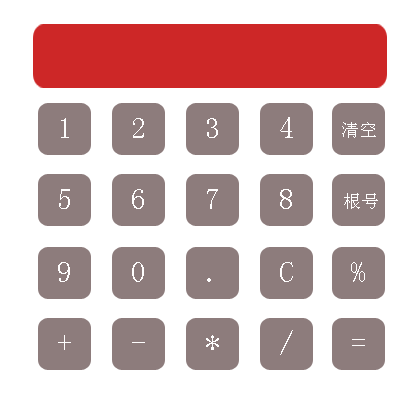
<style>
.page{position:relative;width:420px;height:400px;background:#ffffff}
.page>*{position:absolute;margin:0}
.t1{font:30px "SimSun";color:#fefdfd}
.t2{font:18px "SimSun";color:#fefdfd}
</style>
<div class="page">
<p class="t1" style="left:61px;top:118px;width:8px;height:20px">1</p>
<p class="t1" style="left:133px;top:118px;width:11px;height:20px">2</p>
<p class="t1" style="left:207px;top:118px;width:11px;height:20px">3</p>
<p class="t1" style="left:280px;top:117px;width:13px;height:21px">4</p>
<p class="t2" style="left:342px;top:122px;width:34px;height:16px">清空</p>
<p class="t1" style="left:59px;top:189px;width:11px;height:20px">5</p>
<p class="t1" style="left:132px;top:189px;width:12px;height:20px">6</p>
<p class="t1" style="left:207px;top:189px;width:11px;height:20px">7</p>
<p class="t1" style="left:280px;top:189px;width:12px;height:20px">8</p>
<p class="t2" style="left:344px;top:193px;width:34px;height:16px">根号</p>
<p class="t1" style="left:58px;top:262px;width:12px;height:20px">9</p>
<p class="t1" style="left:132px;top:262px;width:12px;height:20px">0</p>
<p class="t1" style="left:280px;top:262px;width:13px;height:20px">C</p>
<p class="t1" style="left:351px;top:262px;width:14px;height:20px">%</p>
<p class="t1" style="left:207px;top:278px;width:4px;height:4px">.</p>
<p class="t1" style="left:58px;top:335px;width:13px;height:15px">+</p>
<p class="t1" style="left:206px;top:335px;width:13px;height:15px">*</p>
<p class="t1" style="left:280px;top:330px;width:13px;height:25px">/</p>
<p class="t1" style="left:352px;top:339px;width:13px;height:7px">=</p>
</div>
